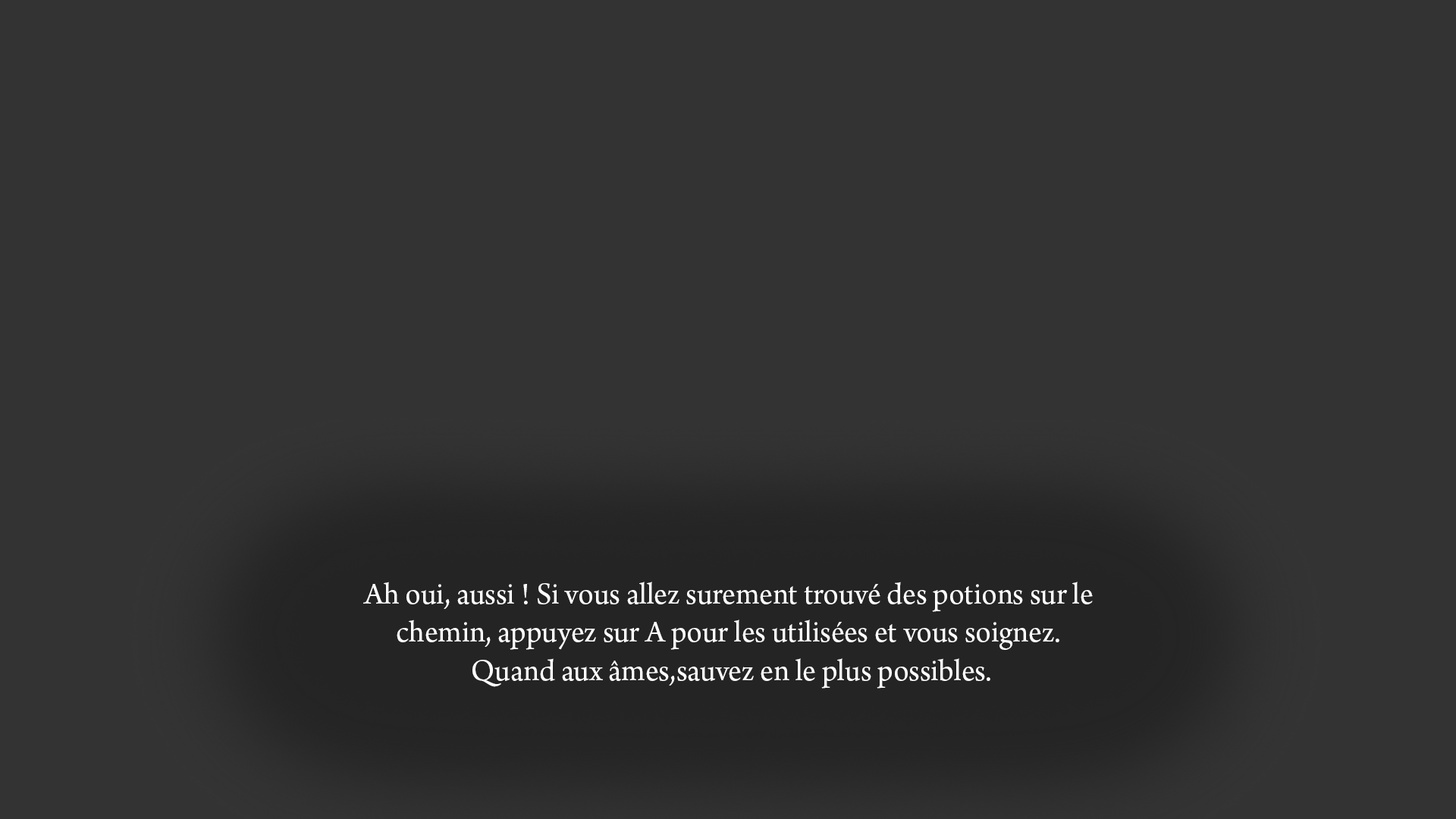
<style>
.page{position:relative;width:1456px;height:819px;background:#333333}
.page>*{position:absolute;margin:0}
.t1{font:31.8px "ArnoPro-Regular";color:#ffffff}
</style>
<div class="page">
<p class="t1" style="left:363px;top:582px;width:730px;height:107px;text-align:center">Ah oui, aussi ! Si vous allez surement trouvé des potions sur le <br>chemin, appuyez sur A pour les utilisées et vous soignez. <br>Quand aux âmes,sauvez en le plus possibles.</p>
</div>
